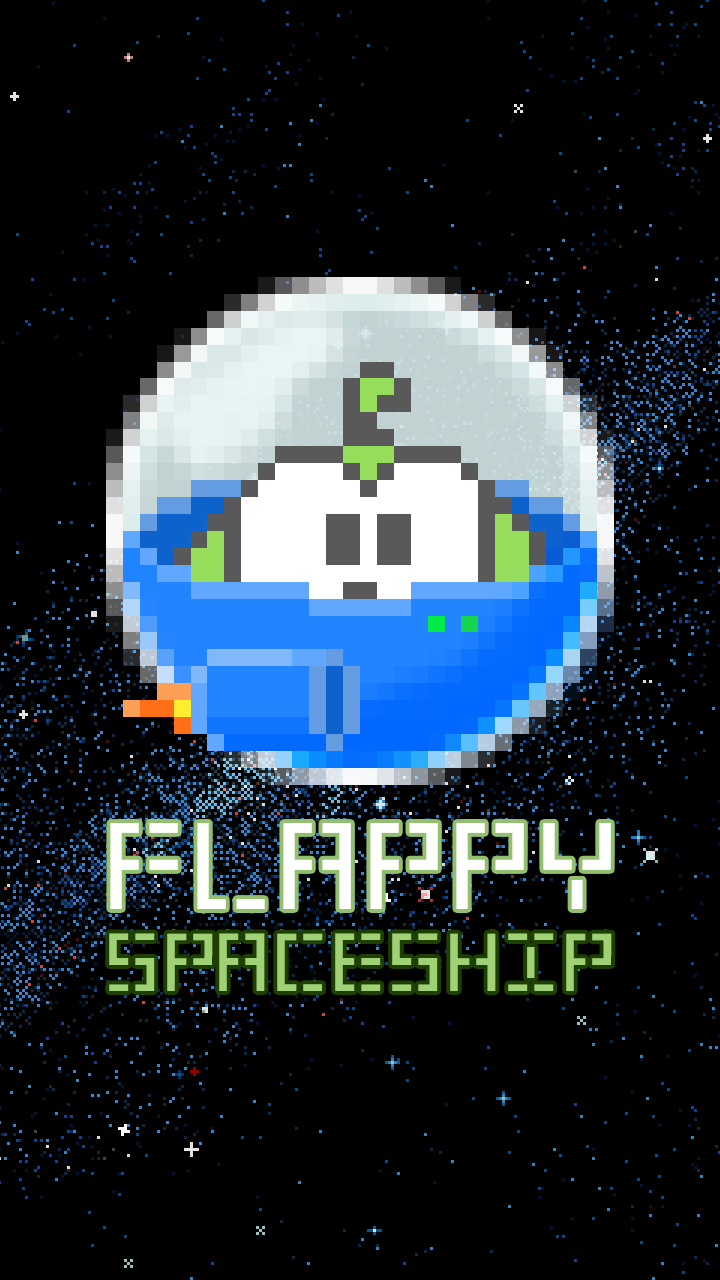
<style>
.page{position:relative;width:720px;height:1280px;background:#000000}
.page>*{position:absolute;margin:0}
.t1{font:120px "Year2000";color:#fffffe}
.t2{font:80px "Year2000";color:#a1d175}
</style>
<div class="page">
<p class="t1" style="left:110px;top:822px;width:501px;height:87px">FLAPPY</p>
<p class="t2" style="left:109px;top:933px;width:503px;height:58px"><span class="t1"><br></span>SPACESHIP</p>
</div>
